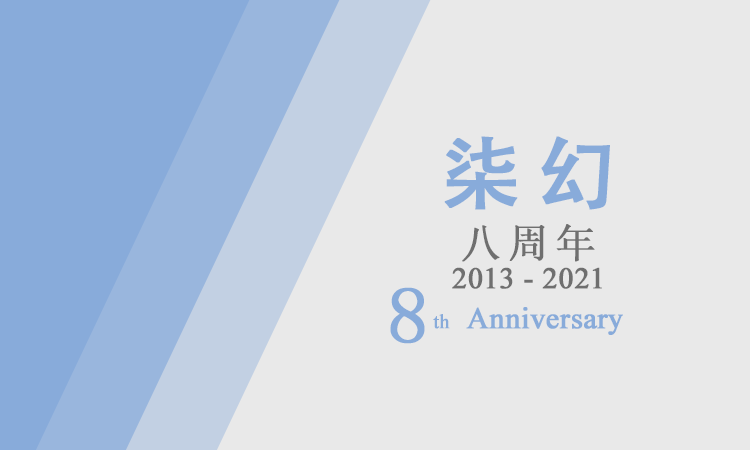
<style>
.page{position:relative;width:750px;height:450px;background:#e9e9e9}
.page>*{position:absolute;margin:0}
.t1{font:30px/40px "TimesNewRomanPSMT";color:#6f6f6f;font-weight:bold}
.t2{font:80px/90px "AdobeHeitiStd-Regular";letter-spacing:0.16em;color:#88abda;font-weight:bold}
.t3{font:40px/40px "SimSun";letter-spacing:0.16em;color:#6f6f6f;font-weight:bold}
.t4{font:20px/40px "TimesNewRomanPSMT";color:#88abda;font-weight:bold}
.t5{font:30px/40px "TimesNewRomanPSMT";color:#88abda;font-weight:bold}
.t6{font:80px "SimSun";letter-spacing:0.16em;color:#88abda;font-weight:bold}
</style>
<div class="page">
<p class="t1" style="left:433px;top:136px;width:190px;height:199px;text-align:center"><span class="t2">柒幻<br></span><span class="t3">八周年<br></span>2013 - 2021<br><span class="t4">th</span><span class="t5">  Anniversary</span></p>
<p class="t6" style="left:390px;top:287px;width:35px;height:57px">8</p>
</div>
